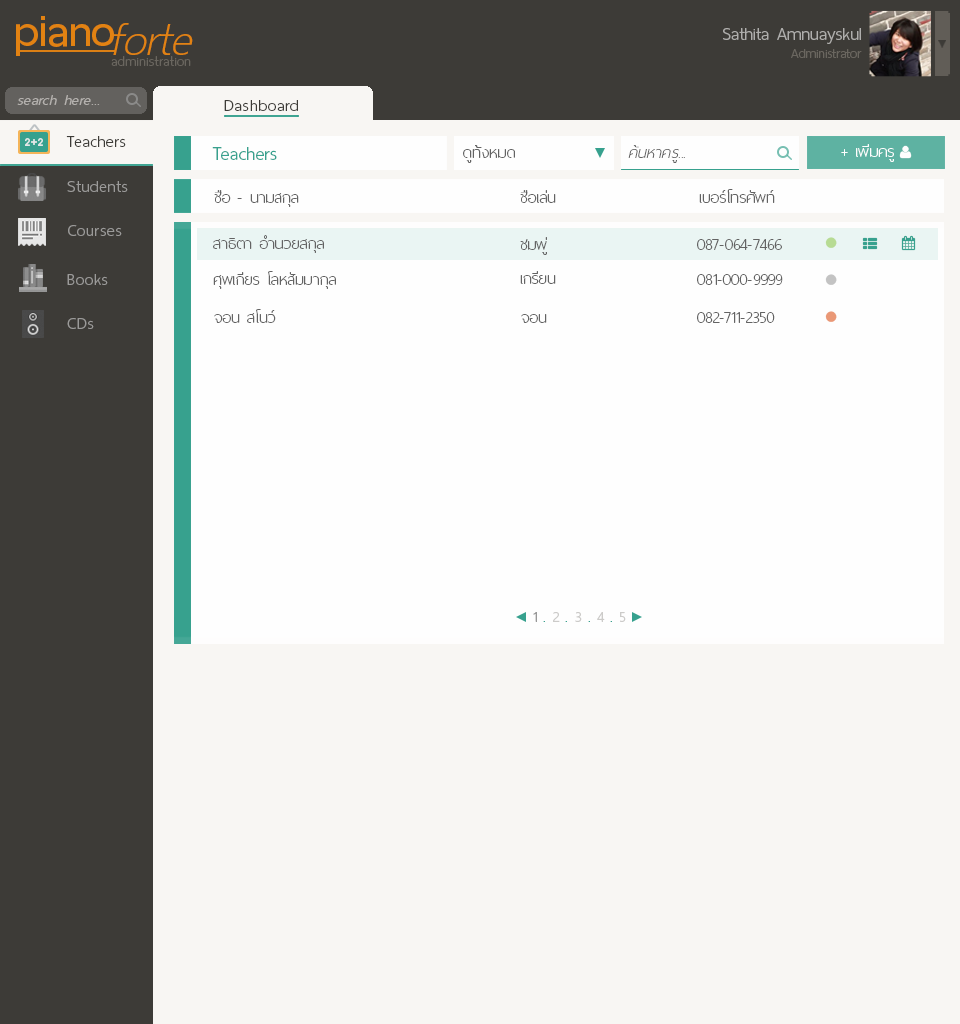
<style>
.page{position:relative;width:960px;height:1024px;background:#f8f6f3}
.page>*{position:absolute;margin:0}
.t1{font:60px "ThaiSansNeue-SemiBold";letter-spacing:-0.005em;color:#e28212}
.t2{font:62px "ThaiSansNeue-ExtraLightItalic";letter-spacing:-0.005em;color:#e28212}
.t3{font:24px "ThaiSansNeue-Light";letter-spacing:-0.005em;color:#afaeac}
.t4{font:18px "ThaiSansNeue-Light";letter-spacing:-0.005em;color:#6a665f}
.t5{font:18.5px "ThaiSansNeue-ExtraLight";letter-spacing:0.025em;color:#6a665f}
.t6{font:20px "ThaiSansNeue-LightItalic";letter-spacing:0.025em;color:#b4b1ae}
.t7{font:22px "ThaiSansNeue-Light";letter-spacing:0.025em;color:#3d3b37}
.t8{font:26px "ThaiSansNeue-Light";letter-spacing:-0.005em;color:#37a18e}
.t9{font:22px "ThaiSansNeue-UltraLight";letter-spacing:0.01em;color:#636363}
.t10{font:22px "ThaiSansNeue-UltraLightItalic";letter-spacing:0.01em;color:#636363}
.t11{font:22px "ThaiSansNeue-UltraLight";color:#fefefe}
.t12{font:22px "ThaiSansNeue-Light";letter-spacing:0.025em;color:#9b9a99}
.t13{font:22px "ThaiSansNeue-UltraLight";color:#636363}
.t14{font:20px "ThaiSansNeue-Light";color:#989898}
.t15{font:20px "ThaiSansNeue-Light";color:#37a18e}
.t16{font:20px "ThaiSansNeue-Light";color:#cccbc9}
</style>
<div class="page">
<p class="t1" style="left:16px;top:16px;width:98px;height:40px">piano</p>
<p class="t2" style="left:113px;top:23px;width:80px;height:32px">forte</p>
<p class="t3" style="left:723px;top:28px;width:138px;height:16px">Sathita Amnuayskul</p>
<p class="t4" style="left:791px;top:49px;width:71px;height:9px">Administrator</p>
<p class="t5" style="left:111px;top:56px;width:80px;height:10px">administration</p>
<p class="t6" style="left:17px;top:95px;width:83px;height:10px">search here...</p>
<p class="t7" style="left:224px;top:100px;width:74px;height:11px">Dashboard</p>
<p class="t7" style="left:66px;top:136px;width:60px;height:11px">Teachers</p>
<p class="t8" style="left:212px;top:147px;width:65px;height:13px">Teachers</p>
<p class="t9" style="left:463px;top:145px;width:52px;height:18px">ดูทั้งหมด</p>
<p class="t10" style="left:628px;top:145px;width:57px;height:18px">ค้นหาครู...</p>
<p class="t11" style="left:841px;top:144px;width:53px;height:18px">+ เพิ่มครู</p>
<p class="t12" style="left:67px;top:181px;width:61px;height:11px">Students</p>
<p class="t13" style="left:214px;top:190px;width:85px;height:17px">ชื่อ - นามสกุล</p>
<p class="t13" style="left:520px;top:190px;width:36px;height:13px">ชื่อเล่น</p>
<p class="t13" style="left:699px;top:189px;width:76px;height:14px">เบอร์โทรศัพท์</p>
<p class="t12" style="left:68px;top:225px;width:54px;height:11px">Courses</p>
<p class="t13" style="left:213px;top:235px;width:111px;height:18px">สาธิตา อำนวยสกุล</p>
<p class="t13" style="left:520px;top:237px;width:27px;height:18px">ชมพู่</p>
<p class="t13" style="left:697px;top:239px;width:85px;height:11px">087-064-7466</p>
<p class="t12" style="left:67px;top:274px;width:41px;height:11px">Books</p>
<p class="t13" style="left:213px;top:271px;width:123px;height:18px">ศุพเกียร โลหสัมมากุล</p>
<p class="t13" style="left:520px;top:271px;width:36px;height:13px">เกรียน</p>
<p class="t13" style="left:697px;top:274px;width:86px;height:11px">081-000-9999</p>
<p class="t12" style="left:67px;top:318px;width:27px;height:11px">CDs</p>
<p class="t13" style="left:214px;top:309px;width:62px;height:14px">จอน สโนว์</p>
<p class="t13" style="left:521px;top:314px;width:26px;height:9px">จอน</p>
<p class="t13" style="left:697px;top:312px;width:78px;height:11px">082-711-2350</p>
<p class="t14" style="left:533px;top:612px;width:93px;height:10px">1 <span class="t15">. </span><span class="t16">2 </span><span class="t15">.</span><span class="t16"> 3 </span><span class="t15">.</span><span class="t16"> 4</span><span class="t15"> .</span><span class="t16"> 5</span></p>
</div>
